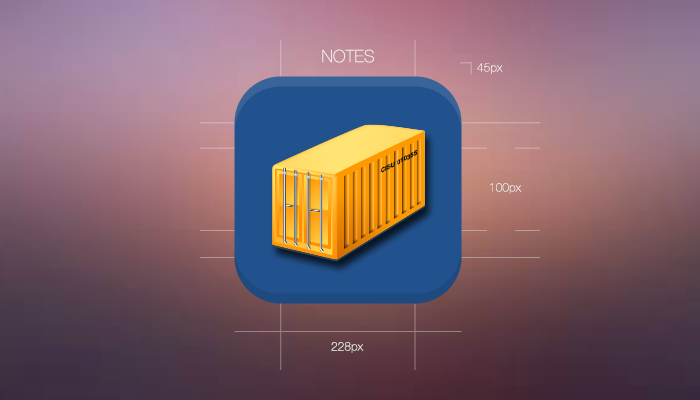
<style>
.page{position:relative;width:700px;height:400px}
.page>*{position:absolute;margin:0}
.t1{font:17px "HelveticaNeueLTStd-Th";color:#ebebeb;text-transform:uppercase}
.t2{font:12px "HelveticaNeueLTStd-Th";color:#ebebeb}
</style>
<div class="page">
<p class="t1" style="left:322px;top:49px;width:52px;height:14px">Notes</p>
<p class="t2" style="left:477px;top:63px;width:26px;height:11px">45px</p>
<p class="t2" style="left:490px;top:183px;width:32px;height:11px">100px</p>
<p class="t2" style="left:331px;top:342px;width:33px;height:11px">228px</p>
</div>
